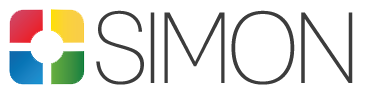
<style>
.page{position:relative;width:370px;height:94px;background:#ffffff}
.page>*{position:absolute;margin:0}
.t1{font:98px "Lane-Narrow";letter-spacing:-0.06em;color:#3c3c3c}
</style>
<div class="page">
<p class="t1" style="left:96px;top:10px;width:257px;height:75px">SIMON</p>
</div>
